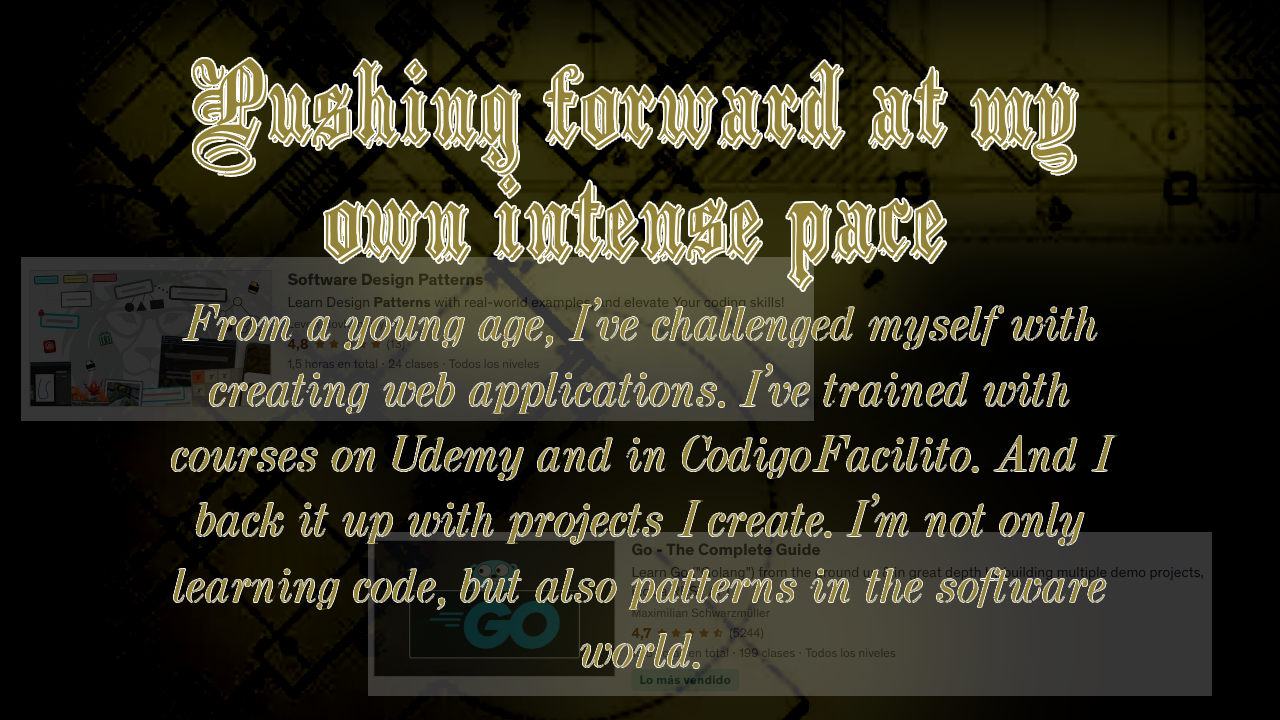
<style>
.page{position:relative;width:1280px;height:720px}
.page>*{position:absolute;margin:0}
.t1{font:95.1px "EmbossedBlack-Normal";color:#928339}
.t2{font:54.5px "Dubiel-Italic";color:#928339}
</style>
<div class="page">
<p class="t1" style="left:192px;top:58px;width:886px;height:233px;text-align:center">Pushing forward at my own intense pace</p>
<p class="t2" style="left:171px;top:298px;width:947px;height:371px;text-align:center">From a young age, I've challenged myself with creating web applications. I've trained with courses on Udemy and in CodigoFacilito. And I back it up with projects I create. I'm not only learning code, but also patterns in the software world.</p>
</div>
